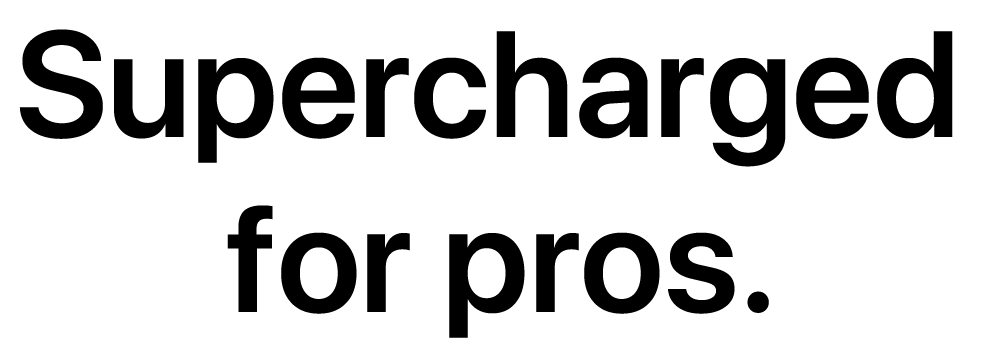
<style>
.page{position:relative;width:983px;height:350px;background:#ffffff}
.page>*{position:absolute;margin:0}
.t1{font:150px/100px "SFProDisplay-Semibold";color:#000000}
</style>
<div class="page">
<p class="t1" style="left:19px;top:29px;width:934px;height:309px;text-align:center">Supercharged <br>for pros.</p>
</div>
